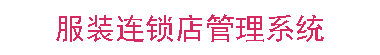
<style>
.page{position:relative;width:380px;height:55px;background:#ffffff}
.page>*{position:absolute;margin:0}
.t1{font:30px "SimHei";color:#d42961}
</style>
<div class="page">
<p class="t1" style="left:56px;top:14px;width:268px;height:28px">服装连锁店管理系统</p>
</div>
